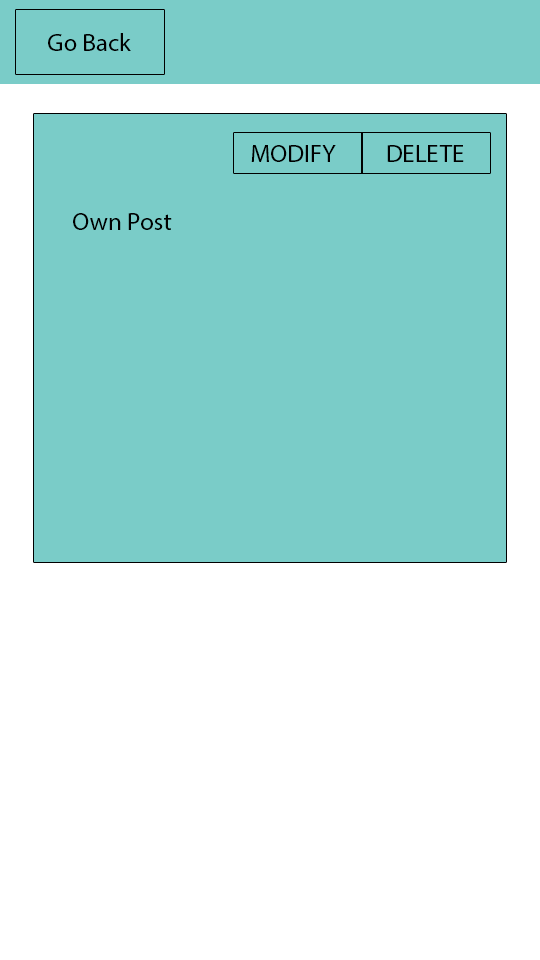
<style>
.page{position:relative;width:540px;height:960px;background:#ffffff}
.page>*{position:absolute;margin:0}
.t1{font:25px "MyriadPro-Regular";color:#000000}
</style>
<div class="page">
<p class="t1" style="left:48px;top:33px;width:83px;height:18px">Go Back</p>
<p class="t1" style="left:251px;top:145px;width:85px;height:17px">MODIFY</p>
<p class="t1" style="left:387px;top:145px;width:77px;height:17px">DELETE</p>
<p class="t1" style="left:73px;top:213px;width:99px;height:17px">Own Post</p>
</div>
